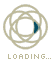
<style>
.page{position:relative;width:52px;height:59px;background:#ffffff}
.page>*{position:absolute;margin:0}
.t1{font:8px "Silkscreen";color:#beba9b}
</style>
<div class="page">
<p class="t1" style="left:8px;top:54px;width:43px;height:5px">loading...</p>
</div>
